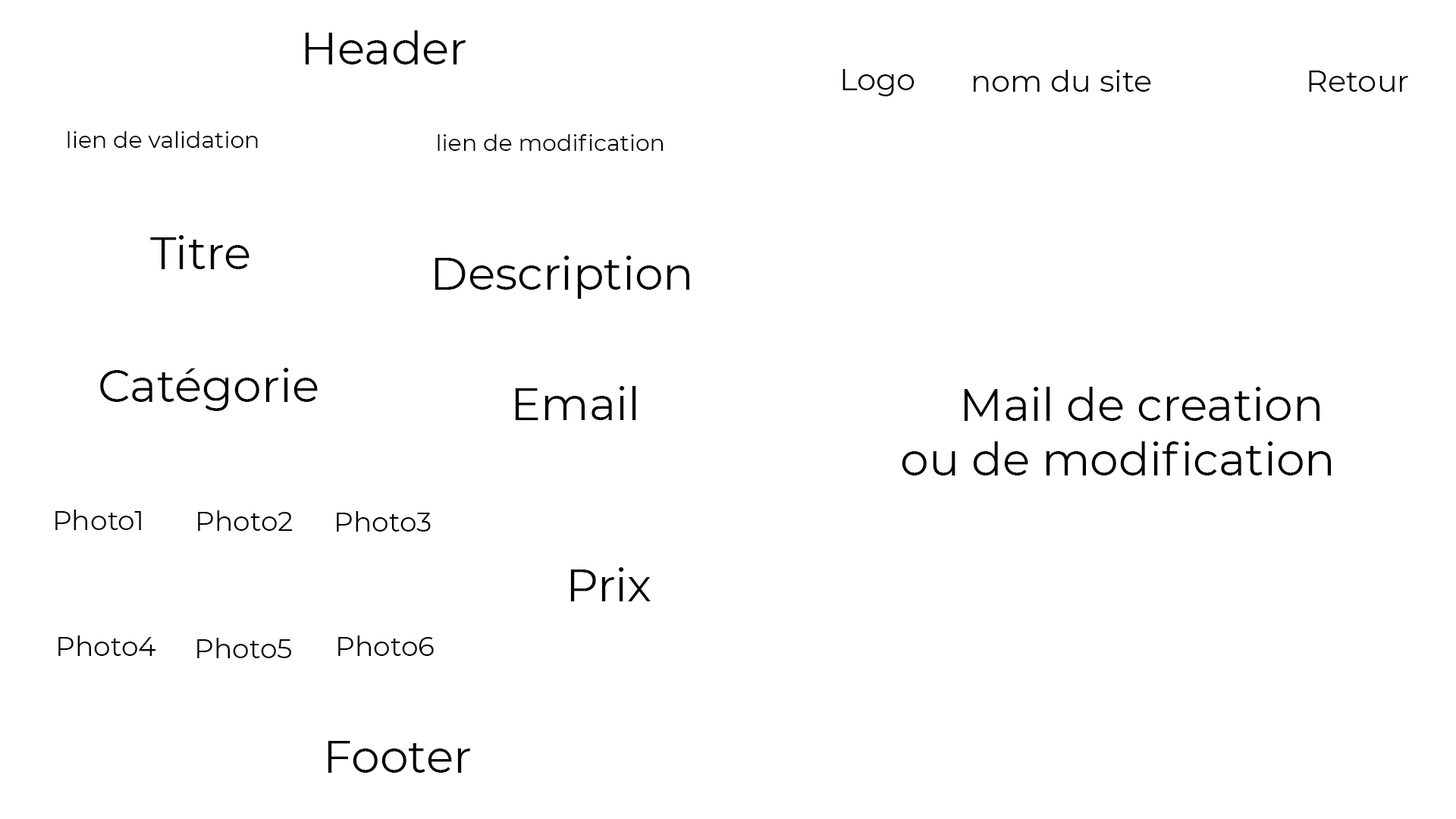
<style>
.page{position:relative;width:1456px;height:819px;background:#ffffff}
.page>*{position:absolute;margin:0}
.t1{font:45.5px "Montserrat-Regular";color:#000608}
.t2{font:30.3px "Montserrat-Regular";color:#080002}
.t3{font:22.7px "Montserrat-Regular";color:#080002}
.t4{font:45.5px "Montserrat-Regular";color:#080002}
.t5{font:45.5px "Montserrat-Regular";color:#010008}
.t6{font:27.3px "Montserrat-Regular";color:#080002}
.t7{font:27.3px "Montserrat-Regular";color:#010008}
</style>
<div class="page">
<p class="t1" style="left:305px;top:30px;width:161px;height:34px">Header</p>
<p class="t2" style="left:842px;top:69px;width:73px;height:27px">Logo</p>
<p class="t2" style="left:974px;top:70px;width:177px;height:22px">nom du site</p>
<p class="t2" style="left:1309px;top:71px;width:99px;height:21px">Retour</p>
<p class="t3" style="left:67px;top:131px;width:191px;height:17px">lien de validation</p>
<p class="t3" style="left:438px;top:134px;width:226px;height:17px">lien de modification</p>
<p class="t4" style="left:150px;top:235px;width:99px;height:34px">Titre</p>
<p class="t4" style="left:435px;top:256px;width:254px;height:43px">Description</p>
<p class="t4" style="left:100px;top:368px;width:218px;height:43px">Catégorie</p>
<p class="t4" style="left:515px;top:386px;width:121px;height:34px">Email</p>
<p class="t5" style="left:902px;top:387px;width:429px;height:88px;text-align:right">Mail de creation <br>ou de modification</p>
<p class="t6" style="left:55px;top:510px;width:86px;height:20px">Photo1</p>
<p class="t7" style="left:198px;top:510px;width:95px;height:21px">Photo2</p>
<p class="t7" style="left:337px;top:511px;width:94px;height:21px">Photo3</p>
<p class="t4" style="left:570px;top:567px;width:81px;height:34px">Prix</p>
<p class="t7" style="left:58px;top:635px;width:98px;height:21px">Photo4</p>
<p class="t7" style="left:197px;top:638px;width:94px;height:20px">Photo5</p>
<p class="t7" style="left:338px;top:635px;width:96px;height:21px">Photo6</p>
<p class="t4" style="left:328px;top:741px;width:142px;height:32px">Footer</p>
</div>
